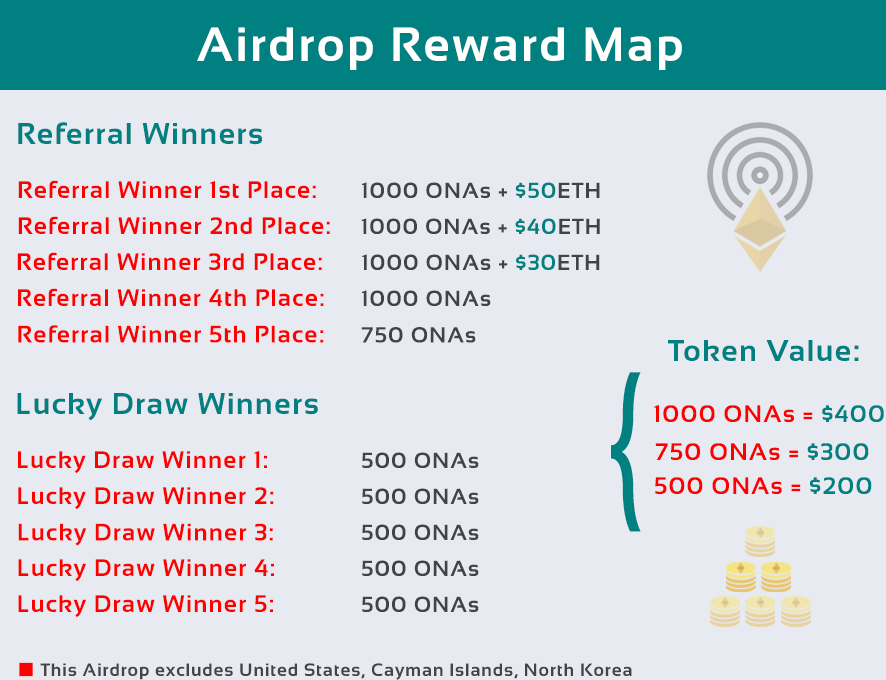
<style>
.page{position:relative;width:886px;height:680px;background:#e8eaf1}
.page>*{position:absolute;margin:0}
.t1{font:48px "Sansation-Bold";letter-spacing:0.05em;color:#ffffff}
.t2{font:30px "Sansation-Bold";letter-spacing:0.05em;color:#008080}
.t3{font:24px "Sansation-Bold";letter-spacing:0.05em;color:#ff0000}
.t4{font:22px "Sansation-Bold";letter-spacing:0.05em;color:#434244}
.t5{font:22px "Sansation-Bold";letter-spacing:0.05em;color:#008080}
.t6{font:180px "Sansation-Regular";letter-spacing:0.05em;color:#008080;scale:0.63 1}
.t7{font:24px "Sansation-Bold";letter-spacing:0.05em;color:#008080}
.t8{font:18px "Sansation-Bold";letter-spacing:0.05em;color:#444444}
</style>
<div class="page">
<p class="t1" style="left:197px;top:27px;width:485px;height:43px">Airdrop Reward Map</p>
<p class="t2" style="left:18px;top:122px;width:245px;height:23px">Referral Winners</p>
<p class="t3" style="left:18px;top:180px;width:298px;height:18px">Referral Winner 1st Place:</p>
<p class="t4" style="left:362px;top:182px;width:238px;height:16px">1000 ONAs + <span class="t5">$50</span>ETH</p>
<p class="t3" style="left:18px;top:216px;width:312px;height:18px">Referral Winner 2nd Place:</p>
<p class="t4" style="left:361px;top:218px;width:239px;height:16px">1000 ONAs + <span class="t5">$40</span>ETH</p>
<p class="t3" style="left:17px;top:252px;width:305px;height:18px">Referral Winner 3rd Place:</p>
<p class="t4" style="left:362px;top:254px;width:238px;height:16px">1000 ONAs + <span class="t5">$30</span>ETH</p>
<p class="t3" style="left:18px;top:288px;width:306px;height:18px">Referral Winner 4th Place:</p>
<p class="t4" style="left:362px;top:290px;width:129px;height:16px">1000 ONAs</p>
<p class="t3" style="left:18px;top:325px;width:306px;height:18px">Referral Winner 5th Place:</p>
<p class="t4" style="left:361px;top:327px;width:115px;height:16px">750 ONAs</p>
<p class="t2" style="left:668px;top:340px;width:191px;height:21px">Token Value:</p>
<p class="t6" style="left:611px;top:372px;width:30px;height:160px">{</p>
<p class="t2" style="left:17px;top:393px;width:301px;height:28px">Lucky Draw Winners</p>
<p class="t3" style="left:654px;top:405px;width:230px;height:17px">1000 ONAs = <span class="t7">$400</span></p>
<p class="t3" style="left:655px;top:443px;width:214px;height:17px">750 ONAs = <span class="t7">$300</span></p>
<p class="t3" style="left:18px;top:451px;width:249px;height:22px">Lucky Draw Winner 1:</p>
<p class="t4" style="left:362px;top:452px;width:117px;height:16px">500 ONAs</p>
<p class="t3" style="left:655px;top:477px;width:217px;height:17px">500 ONAs = <span class="t7">$200</span></p>
<p class="t3" style="left:18px;top:487px;width:256px;height:22px">Lucky Draw Winner 2:</p>
<p class="t4" style="left:362px;top:488px;width:117px;height:16px">500 ONAs</p>
<p class="t3" style="left:18px;top:523px;width:255px;height:23px">Lucky Draw Winner 3:</p>
<p class="t4" style="left:362px;top:524px;width:117px;height:16px">500 ONAs</p>
<p class="t3" style="left:18px;top:559px;width:256px;height:22px">Lucky Draw Winner 4:</p>
<p class="t4" style="left:362px;top:560px;width:117px;height:16px">500 ONAs</p>
<p class="t3" style="left:18px;top:595px;width:255px;height:22px">Lucky Draw Winner 5:</p>
<p class="t4" style="left:362px;top:596px;width:117px;height:16px">500 ONAs</p>
<p class="t8" style="left:40px;top:663px;width:592px;height:17px">This Airdrop excludes United States, Cayman Islands, North Korea</p>
</div>
